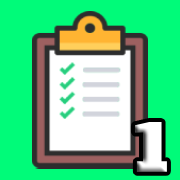
<style>
.page{position:relative;width:180px;height:180px;background:#00fb79}
.page>*{position:absolute;margin:0}
.t1{font:64px "AlfaSlabOne-Regular";color:#ffffff}
</style>
<div class="page">
<p class="t1" style="left:134px;top:121px;width:33px;height:51px">1</p>
</div>
